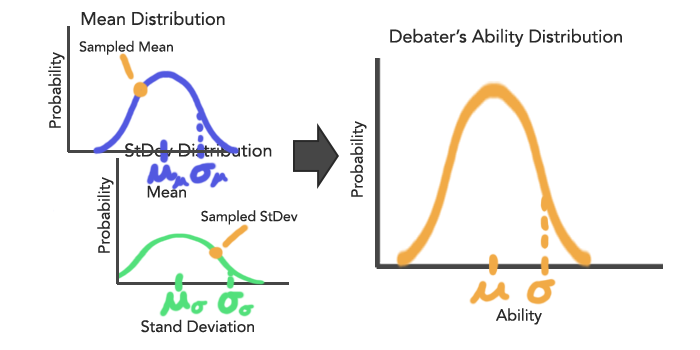
<style>
.page{position:relative;width:700px;height:350px;background:#ffffff}
.page>*{position:absolute;margin:0}
.t1{font:18px "AvenirLTStd-Roman";color:#292929}
.t2{font:14px "AvenirLTStd-Roman";color:#292929}
.t3{font:16px "AvenirLTStd-Roman";color:#292929}
</style>
<div class="page">
<p class="t1" style="left:81px;top:11px;width:144px;height:15px">Mean Distribution</p>
<p class="t1" style="left:390px;top:28px;width:232px;height:19px">Debater’s Ability Distribution</p>
<p class="t2" style="left:79px;top:40px;width:94px;height:15px">Sampled Mean</p>
<p class="t3" style="left:48px;top:52px;width:17px;height:76px;rotate:-90deg">Probability</p>
<p class="t3" style="left:350px;top:121px;width:17px;height:76px;rotate:-90deg">Probability</p>
<p class="t1" style="left:125px;top:142px;width:147px;height:15px">StDev Distribution</p>
<p class="t3" style="left:97px;top:177px;width:17px;height:76px;rotate:-90deg">Probability</p>
<p class="t3" style="left:147px;top:185px;width:39px;height:13px">Mean</p>
<p class="t2" style="left:201px;top:210px;width:97px;height:15px">Sampled StDev</p>
<p class="t3" style="left:496px;top:308px;width:46px;height:17px">Ability</p>
<p class="t3" style="left:141px;top:319px;width:113px;height:14px">Stand Deviation</p>
</div>
